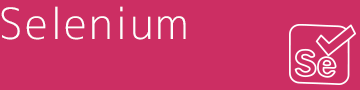
<style>
.page{position:relative;width:360px;height:90px;background:#cc2e63}
.page>*{position:absolute;margin:0}
.t1{font:43px "mplus-1c-light";letter-spacing:0.05em;color:#fefefe}
</style>
<div class="page">
<p class="t1" style="left:1px;top:6px;width:185px;height:34px">Selenium</p>
</div>
